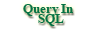
<style>
.page{position:relative;width:100px;height:30px;background:#ffffff}
.page>*{position:absolute;margin:0}
.t1{font:12.5px/10.4px "TimesNewRomanPS-BoldMT";color:#057244}
.t2{font:13px/10.4px "TimesNewRomanPS-BoldMT";color:#030303}
</style>
<div class="page">
<p class="t1" style="left:23px;top:4px;width:50px;height:22px"><span class="t2">       </span>Query In <br> SQL</p>
</div>
